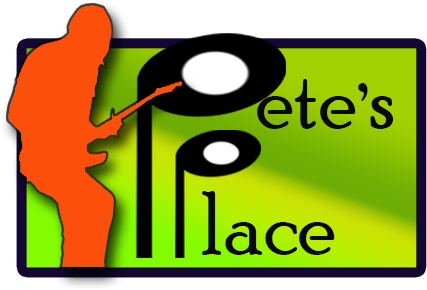
<style>
.page{position:relative;width:427px;height:290px}
.page>*{position:absolute;margin:0}
.t1{font:90px/125.9px "PoorRichard-Regular";color:#080808;scale:0.95 1}
.t2{font:90px/121.4px "PoorRichard-Regular";color:#080808;scale:0.95 1}
.t3{font:90px/98.9px "PoorRichard-Regular";color:#080808;scale:0.95 1}
</style>
<div class="page">
<p class="t1" style="left:202px;top:79px;width:192px;height:176px"><span class="t2">      ete</span><span class="t3">’</span><span class="t2">s<br>  </span>lace</p>
</div>
